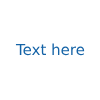
<style>
.page{position:relative;width:100px;height:100px;background:#ffffff}
.page>*{position:absolute;margin:0}
.t1{font:15px "DejaVuSans";color:#1463a7}
</style>
<div class="page">
<p class="t1" style="left:15px;top:43px;width:70px;height:13px">Text here</p>
</div>
